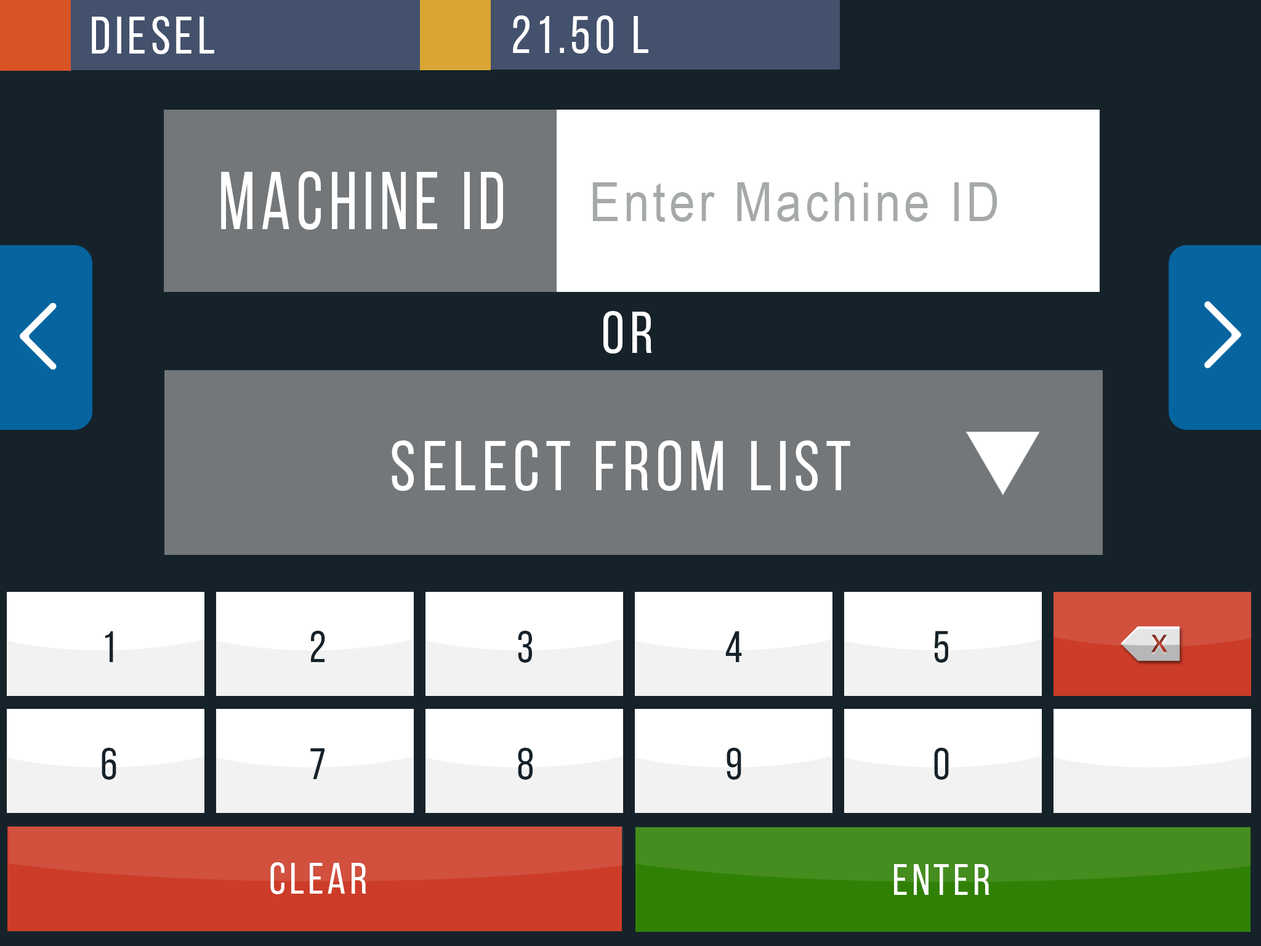
<style>
.page{position:relative;width:1261px;height:946px;background:#16222a}
.page>*{position:absolute;margin:0}
.t1{font:52.6px "BebasNeueRegular";letter-spacing:0.08em;color:#ffffff}
.t2{font:82.2px "BebasNeueRegular";letter-spacing:0.08em;color:#ffffff;scale:0.85 1}
.t3{font:53.7px "ArialMT";letter-spacing:0.08em;color:#a6a9aa;scale:0.86 1}
.t4{font:58.9px "BebasNeueRegular";letter-spacing:0.08em;color:#ffffff}
.t5{font:70.2px "BebasNeueRegular";letter-spacing:0.08em;color:#ffffff}
.t6{font:44.3px "BebasNeueRegular";letter-spacing:0.08em;color:#16222a}
.t7{font:44.3px "BebasNeueRegular";letter-spacing:0.08em;color:#ffffff}
</style>
<div class="page">
<p class="t1" style="left:92px;top:16px;width:122px;height:38px">DIESEL</p>
<p class="t1" style="left:513px;top:15px;width:135px;height:39px">21.50 L</p>
<p class="t2" style="left:221px;top:171px;width:282px;height:59px">machine id</p>
<p class="t3" style="left:592px;top:182px;width:405px;height:40px">Enter Machine ID</p>
<p class="t4" style="left:603px;top:311px;width:49px;height:42px">or</p>
<p class="t5" style="left:392px;top:440px;width:458px;height:51px">select from list</p>
<p class="t6" style="left:105px;top:631px;width:8px;height:31px">1</p>
<p class="t6" style="left:311px;top:630px;width:14px;height:32px">2</p>
<p class="t6" style="left:518px;top:630px;width:14px;height:32px">3</p>
<p class="t6" style="left:725px;top:631px;width:17px;height:31px">4</p>
<p class="t6" style="left:935px;top:630px;width:13px;height:32px">5</p>
<p class="t6" style="left:102px;top:747px;width:14px;height:32px">6</p>
<p class="t6" style="left:310px;top:748px;width:14px;height:31px">7</p>
<p class="t6" style="left:518px;top:747px;width:15px;height:32px">8</p>
<p class="t6" style="left:727px;top:747px;width:14px;height:32px">9</p>
<p class="t6" style="left:934px;top:747px;width:15px;height:32px">0</p>
<p class="t7" style="left:270px;top:862px;width:96px;height:32px">clear</p>
<p class="t7" style="left:894px;top:864px;width:95px;height:31px">enter</p>
</div>
